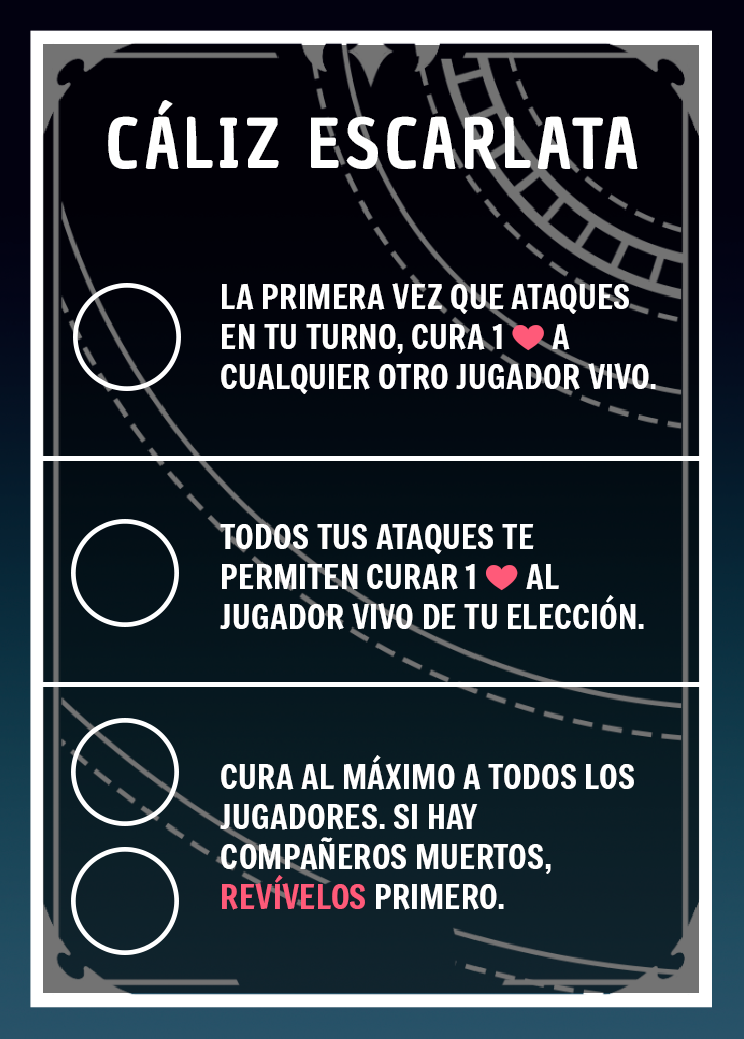
<style>
.page{position:relative;width:744px;height:1039px}
.page>*{position:absolute;margin:0}
.t1{font:66.7px "ChauPhilomeneOne-Regular";letter-spacing:0.075em;color:#ffffff}
.t2{font:33.3px "Freeman-Regular";color:#ffffff}
.t3{font:33.3px "EmojiOneColor";color:#ffffff}
.t4{font:33.3px "Freeman-Regular";color:#ff5a79}
</style>
<div class="page">
<p class="t1" style="left:108px;top:100px;width:530px;height:69px">CÁLIZ ESCARLATA</p>
<p class="t2" style="left:221px;top:283px;width:435px;height:111px">LA PRIMERA VEZ QUE ATAQUES EN TU TURNO, CURA 1 <span class="t3">❤️</span> A CUALQUIER OTRO JUGADOR VIVO.</p>
<p class="t2" style="left:220px;top:523px;width:424px;height:107px">TODOS TUS ATAQUES TE PERMITEN CURAR 1 <span class="t3">❤️</span> AL JUGADOR VIVO DE TU ELECCIÓN.</p>
<p class="t2" style="left:220px;top:755px;width:414px;height:155px">CURA AL MÁXIMO A TODOS LOS JUGADORES. SI HAY COMPAÑEROS MUERTOS, <span class="t4">REVÍVELOS </span>PRIMERO.</p>
</div>
